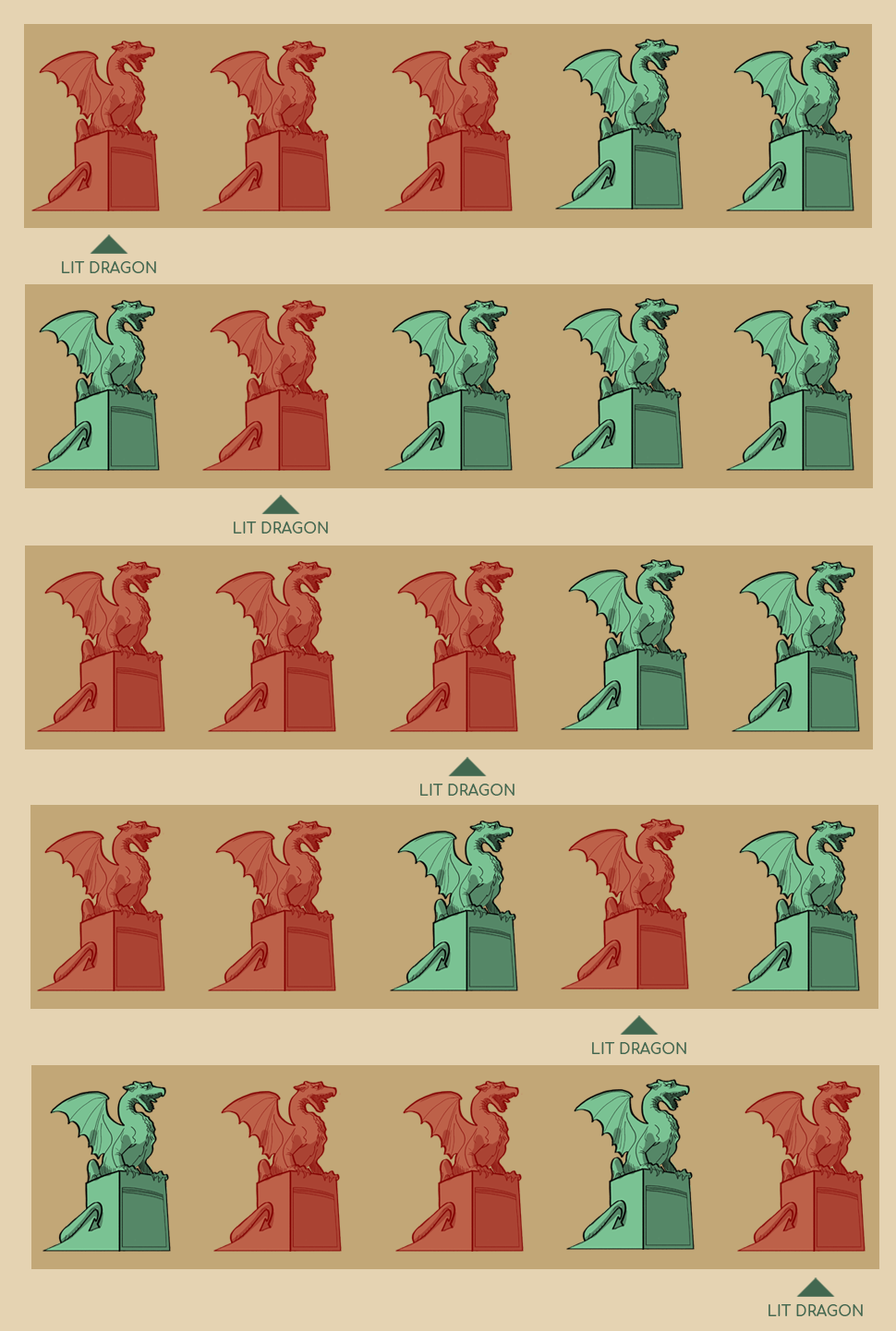
<style>
.page{position:relative;width:896px;height:1331px;background:#c2a777}
.page>*{position:absolute;margin:0}
.t1{font:14.9px "Comfortaa-Bold";color:#426850}
</style>
<div class="page">
<p class="t1" style="left:62px;top:261px;width:94px;height:12px">LIT DRAGON</p>
<p class="t1" style="left:234px;top:522px;width:94px;height:12px">LIT DRAGON</p>
<p class="t1" style="left:420px;top:784px;width:94px;height:12px">LIT DRAGON</p>
<p class="t1" style="left:592px;top:1042px;width:94px;height:12px">LIT DRAGON</p>
<p class="t1" style="left:768px;top:1305px;width:94px;height:12px">LIT DRAGON</p>
</div>
